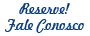
<style>
.page{position:relative;width:90px;height:36px;background:#ffffff}
.page>*{position:absolute;margin:0}
.t1{font:14.3px "Freehand521BT-RegularC";color:#0b3b7b}
</style>
<div class="page">
<p class="t1" style="left:19px;top:3px;width:51px;height:11px">Reserve!</p>
<p class="t1" style="left:5px;top:19px;width:79px;height:14px">Fale Conosco</p>
</div>
